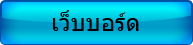
<style>
.page{position:relative;width:193px;height:45px}
.page>*{position:absolute;margin:0}
.t1{font:24px "Tahoma";color:#040404}
</style>
<div class="page">
<p class="t1" style="left:53px;top:10px;width:86px;height:21px">เว็บบอร์ด</p>
</div>
